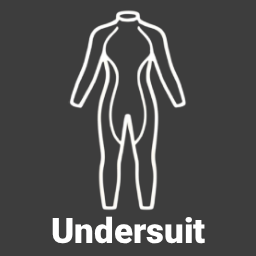
<style>
.page{position:relative;width:256px;height:256px;background:#3d3d3d}
.page>*{position:absolute;margin:0}
.t1{font:35px "Roboto-Black";color:#ffffff}
</style>
<div class="page">
<p class="t1" style="left:52px;top:216px;width:153px;height:28px">Undersuit</p>
</div>
